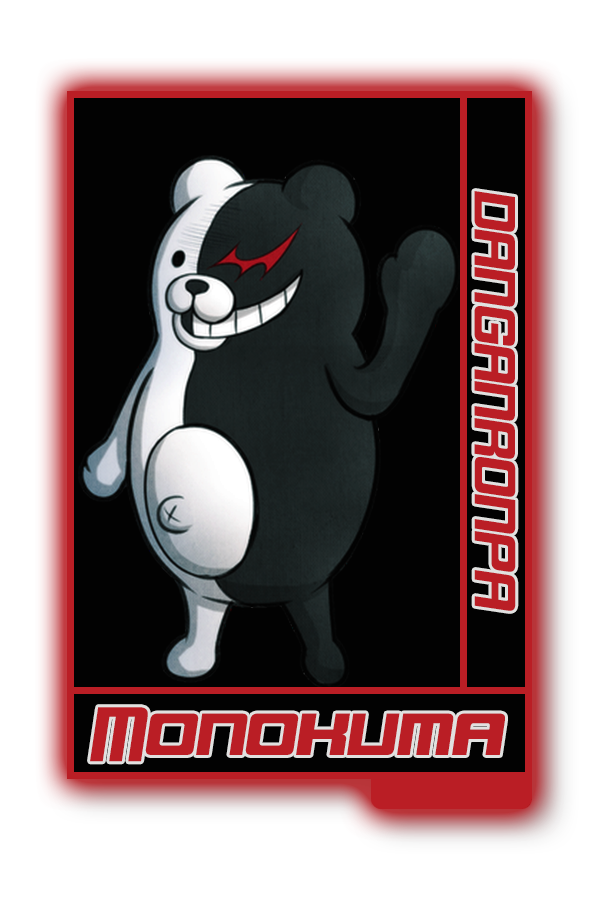
<style>
.page{position:relative;width:600px;height:900px;background:#020202}
.page>*{position:absolute;margin:0}
.t1{font:48.8px "DorBlue";color:#bb2c2e}
.t2{font:65.2px "DorBlue";color:#bb2c2e}
</style>
<div class="page">
<p class="t1" style="left:474px;top:191px;width:42px;height:420px;rotate:90deg">DANGANRONPA</p>
<p class="t2" style="left:90px;top:707px;width:415px;height:55px">Monokuma</p>
</div>
